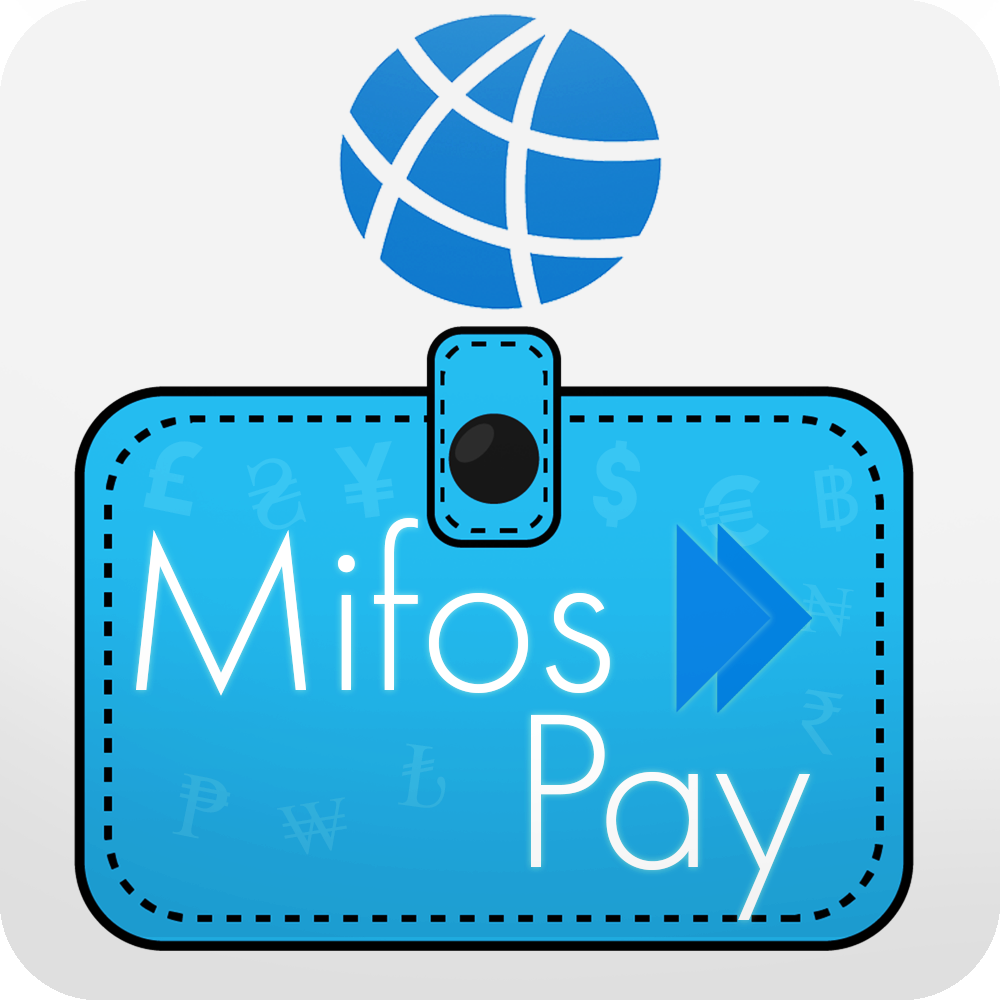
<style>
.page{position:relative;width:1000px;height:1000px;background:#f3f3f3}
.page>*{position:absolute;margin:0}
.t1{font:92.5px "LemonMilk";color:#38c5f2}
.t2{font:92.5px "LemonMilk";color:#38c6f3}
.t3{font:102.6px "TimesNewRomanPSMT";color:#38c6f3}
.t4{font:79.3px "Tahoma";color:#37c5f3}
.t5{font:90px "LemonMilk";color:#38c6f2}
.t6{font:232.2px "FuturaPT-Light";color:#ffffff}
.t7{font:70.5px "TimesNewRomanPSMT";color:#36c1ee}
.t8{font:92.5px "TimesNewRomanPSMT";color:#33b8e5}
.t9{font:228.6px "FuturaPT-Light";color:#ffffff}
.t10{font:92.5px "TimesNewRomanPSMT";color:#33b4e0}
.t11{font:92.5px "TimesNewRomanPSMT";color:#30aedb}
.t12{font:74.2px "TimesNewRomanPSMT";color:#30aedb}
</style>
<div class="page">
<p class="t1" style="left:143px;top:441px;width:60px;height:76px;rotate:12deg">£</p>
<p class="t2" style="left:334px;top:441px;width:60px;height:77px;rotate:-8deg">¥</p>
<p class="t2" style="left:593px;top:440px;width:48px;height:88px;rotate:7deg">$</p>
<p class="t3" style="left:246px;top:458px;width:61px;height:72px;rotate:-17deg">₴</p>
<p class="t4" style="left:814px;top:464px;width:44px;height:68px;rotate:-7deg">฿</p>
<p class="t5" style="left:698px;top:475px;width:72px;height:72px;rotate:-10deg">€</p>
<p class="t6" style="left:136px;top:518px;width:474px;height:178px">Mifos</p>
<p class="t7" style="left:799px;top:583px;width:55px;height:54px;rotate:7deg">₦</p>
<p class="t8" style="left:801px;top:689px;width:43px;height:67px;rotate:9deg">₹</p>
<p class="t9" style="left:531px;top:714px;width:279px;height:206px">Pay</p>
<p class="t10" style="left:398px;top:743px;width:48px;height:65px;rotate:8deg">₺</p>
<p class="t11" style="left:172px;top:773px;width:59px;height:66px;rotate:11deg">₱</p>
<p class="t12" style="left:277px;top:797px;width:70px;height:58px;rotate:-9deg">₩</p>
</div>
